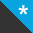
<style>
.page{position:relative;width:33px;height:33px;background:#333333}
.page>*{position:absolute;margin:0}
.t1{font:24px "MicrosoftYaHei";letter-spacing:0.029em;color:#ffffff}
</style>
<div class="page">
<p class="t1" style="left:18px;top:5px;width:10px;height:10px">*</p>
</div>
